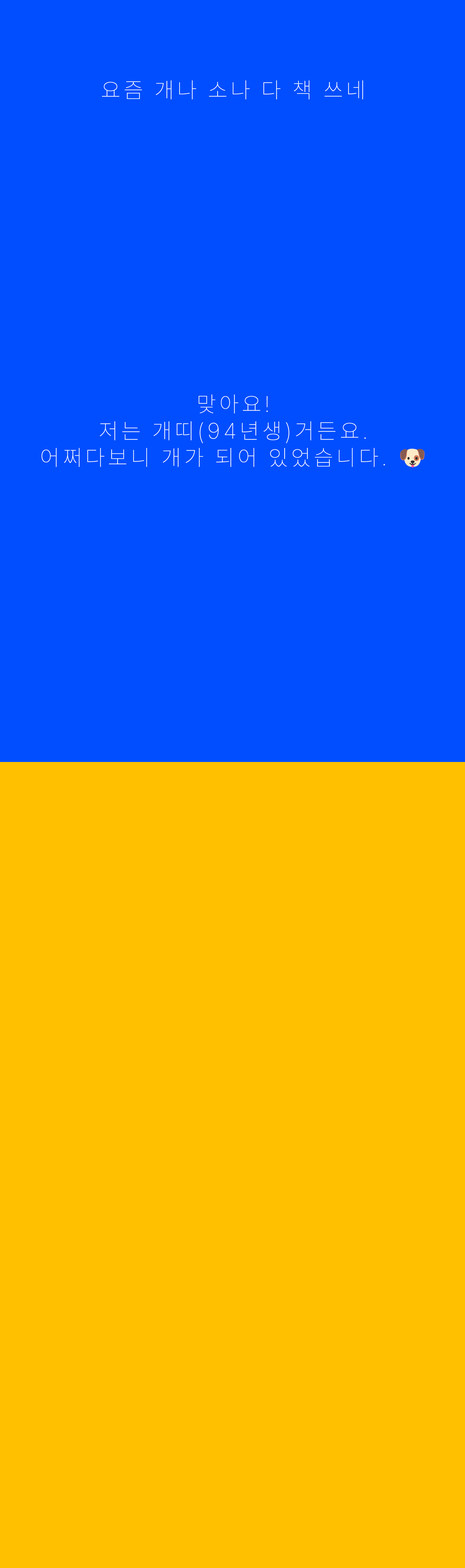
<style>
.page{position:relative;width:465px;height:1568px;background:#ffc000}
.page>*{position:absolute;margin:0}
.t1{font:22.3px "Pretendard-Thin";letter-spacing:0.15em;color:#ffffff}
.t2{font:22.3px "NotoColorEmoji-SVG";letter-spacing:0.15em;color:#ffffff}
</style>
<div class="page">
<p class="t1" style="left:102px;top:80px;width:261px;height:19px">요즘 개나 소나 다 책 쓰네</p>
<p class="t1" style="left:41px;top:394px;width:383px;height:73px;text-align:center">맞아요!<br>저는 개띠(94년생)거든요.<br>어쩌다보니 개가 되어 있었습니다. <span class="t2">🐶</span></p>
</div>
